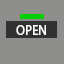
<style>
.page{position:relative;width:64px;height:64px;background:#8e8e8d}
.page>*{position:absolute;margin:0}
.t1{font:12px "AdobeHeitiStd-Regular";color:#ffffff}
</style>
<div class="page">
<p class="t1" style="left:16px;top:25px;width:30px;height:10px">OPEN</p>
</div>
